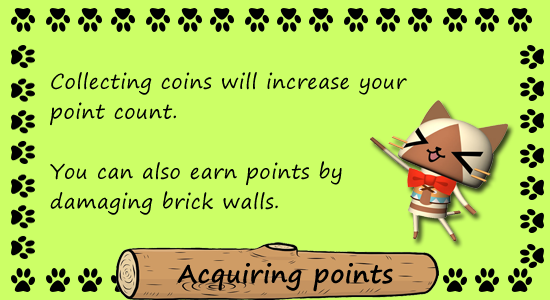
<style>
.page{position:relative;width:550px;height:300px;background:#ccff66}
.page>*{position:absolute;margin:0}
.t1{font:20px/30px "SegoePrint";letter-spacing:0.025em;color:#000000}
.t2{font:25px "SegoePrint-Bold";letter-spacing:0.025em;color:#000000}
</style>
<div class="page">
<p class="t1" style="left:50px;top:72px;width:357px;height:143px">Collecting coins will increase your <br>point count. <br><br>You can also earn points by <br>damaging brick walls.</p>
<p class="t2" style="left:177px;top:263px;width:216px;height:29px">Acquiring points</p>
</div>
